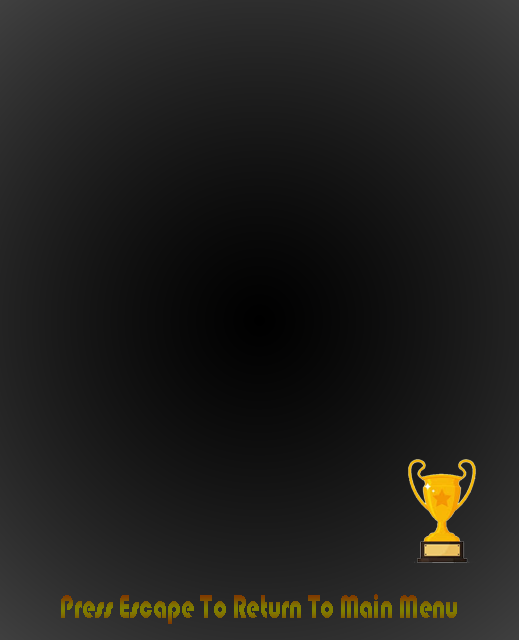
<style>
.page{position:relative;width:519px;height:640px}
.page>*{position:absolute;margin:0}
.t1{font:34.1px "Bauhaus93";color:#807000;scale:0.71 1}
</style>
<div class="page">
<p class="t1" style="left:61px;top:594px;width:396px;height:30px">Press Escape To Return To Main Menu</p>
</div>
